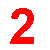
<style>
.page{position:relative;width:50px;height:50px;background:#ffffff}
.page>*{position:absolute;margin:0}
.t1{font:50px "Arial-BoldMT";color:#fd0606}
</style>
<div class="page">
<p class="t1" style="left:10px;top:8px;width:24px;height:36px">2</p>
</div>
